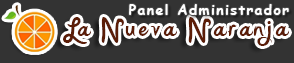
<style>
.page{position:relative;width:294px;height:63px;background:#333333}
.page>*{position:absolute;margin:0}
.t1{font:14px "ComicSansMS-Bold";letter-spacing:0.1em;color:#ffffff}
.t2{font:36px "KatyBerry";letter-spacing:0.1em;color:#5b1d07}
</style>
<div class="page">
<p class="t1" style="left:129px;top:4px;width:160px;height:11px">Panel Administrador</p>
<p class="t2" style="left:63px;top:17px;width:226px;height:29px">La Nueva Naranja</p>
</div>
